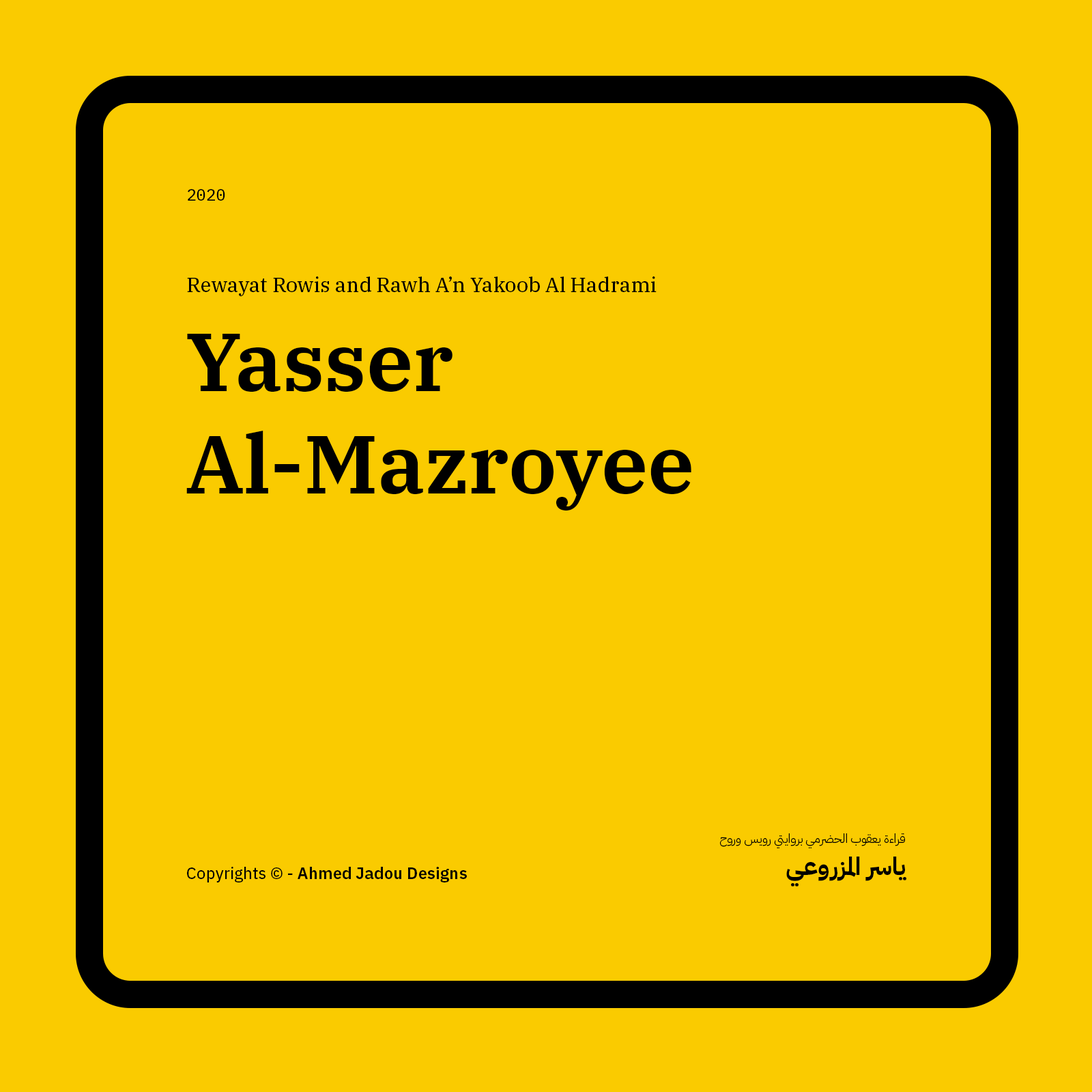
<style>
.page{position:relative;width:1092px;height:1092px;background:#facb00}
.page>*{position:absolute;margin:0}
.t1{font:16.4px "IBMPlexMono-Text";color:#000000}
.t2{font:20.5px "IBMPlexSerif-Text";color:#000000}
.t3{font:81.9px/102.7px "IBMPlexSerif-SemiBold";color:#000000}
.t4{font:12.3px "IBMPlexArabic-Light";color:#000000}
.t5{font:24.6px "IBMPlexArabic-Bold";color:#000000}
.t6{font:16.4px "IBMPlexSans-SemiBold";color:#000000}
.t7{font:16.4px "IBMPlexSans-Text";color:#000000}
</style>
<div class="page">
<p class="t1" style="left:188px;top:189px;width:37px;height:12px">2020</p>
<p class="t2" style="left:187px;top:276px;width:470px;height:20px">Rewayat Rowis and Rawh A’n Yakoob Al Hadrami</p>
<p class="t3" style="left:186px;top:334px;width:505px;height:177px">Yasser Al-Mazroyee</p>
<p class="t4" style="left:720px;top:833px;width:185px;height:15px">قراءة يعقوب الحضرمي بروايتي رويس وروح</p>
<p class="t5" style="left:786px;top:857px;width:120px;height:30px">ياسر المزروعي</p>
<p class="t6" style="left:187px;top:867px;width:280px;height:15px"><span class="t7">Copyrights © - </span>Ahmed Jadou Designs</p>
</div>
